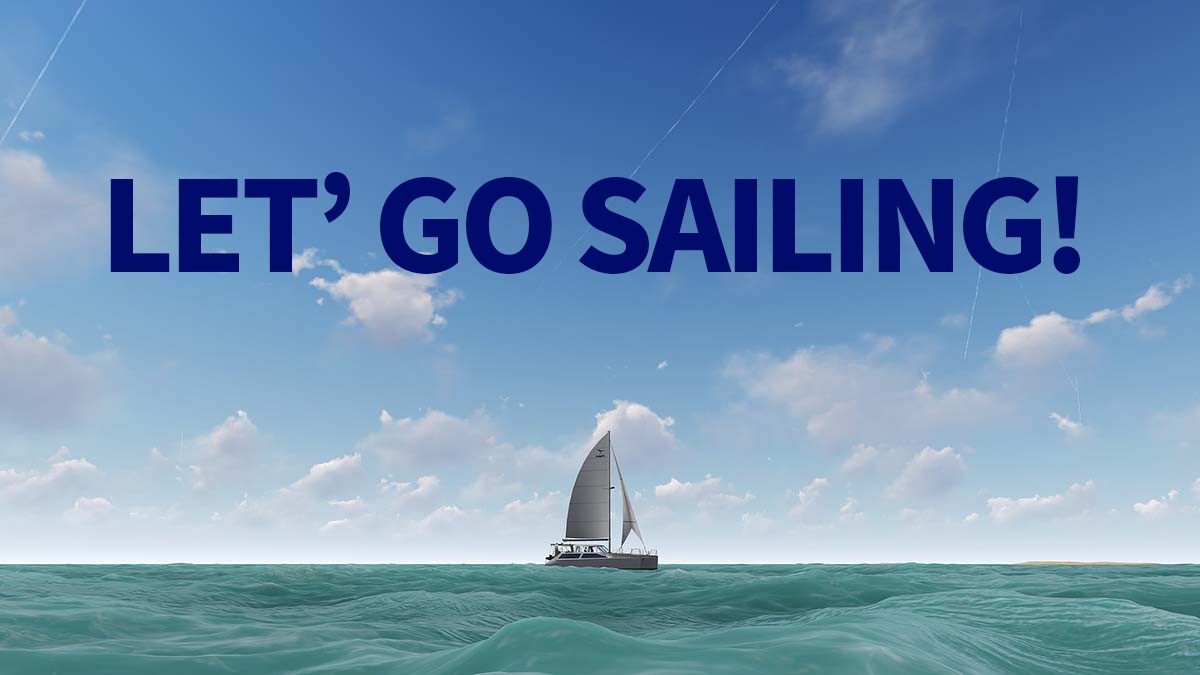
<style>
.page{position:relative;width:1200px;height:675px}
.page>*{position:absolute;margin:0}
.t1{font:125px "SourceHanSans-Heavy";letter-spacing:-0.05em;color:#010b6b}
</style>
<div class="page">
<p class="t1" style="left:110px;top:172px;width:970px;height:102px">LET’ GO SAILING!</p>
</div>
